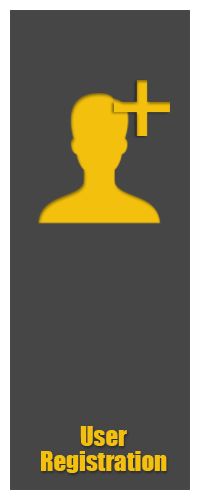
<style>
.page{position:relative;width:200px;height:500px;background:#464646}
.page>*{position:absolute;margin:0}
.t1{font:25px/25px "Impact";color:#f3c00e}
</style>
<div class="page">
<p class="t1" style="left:41px;top:426px;width:126px;height:47px;text-align:center">User<br>Registration</p>
</div>
